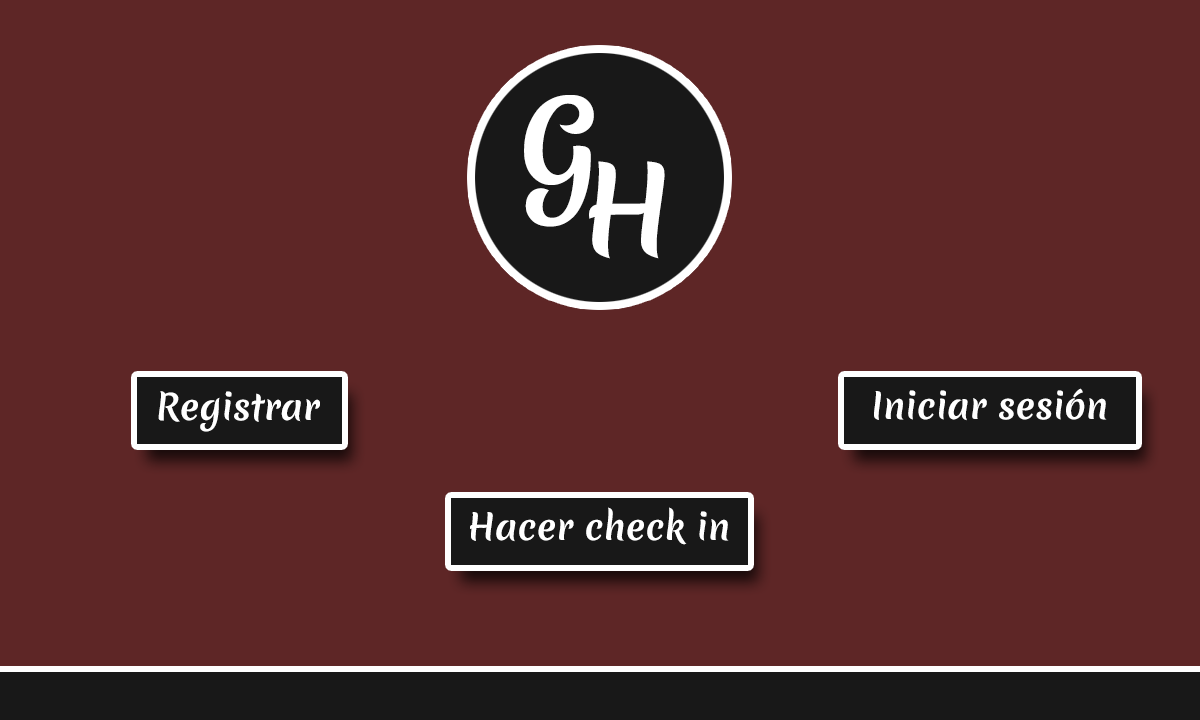
<style>
.page{position:relative;width:1200px;height:720px;background:#5e2626}
.page>*{position:absolute;margin:0}
.t1{font:115.9px "MeriendaOne-Regular";color:#ffffff}
.t2{font:35.1px "MeriendaOne-Regular";color:#ffffff}
</style>
<div class="page">
<p class="t1" style="left:524px;top:95px;width:70px;height:132px">G</p>
<p class="t1" style="left:589px;top:161px;width:76px;height:98px">H</p>
<p class="t2" style="left:874px;top:388px;width:233px;height:33px">Iniciar sesión</p>
<p class="t2" style="left:158px;top:391px;width:162px;height:41px">Registrar</p>
<p class="t2" style="left:470px;top:507px;width:259px;height:38px">Hacer check in</p>
</div>
